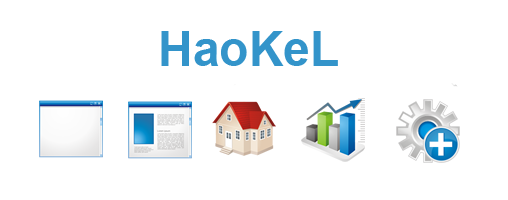
<style>
.page{position:relative;width:508px;height:200px;background:#ffffff}
.page>*{position:absolute;margin:0}
.t1{font:48px "Arial-BoldMT";color:#3394ca}
</style>
<div class="page">
<p class="t1" style="left:161px;top:31px;width:177px;height:35px">HaoKeL</p>
</div>
